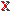
<style>
.page{position:relative;width:11px;height:11px;background:#ffffff}
.page>*{position:absolute;margin:0}
.t1{font:12.2px "CenturySchoolbook";color:#ff0000}
</style>
<div class="page">
<p class="t1" style="left:1px;top:1px;width:8px;height:9px">X</p>
</div>
